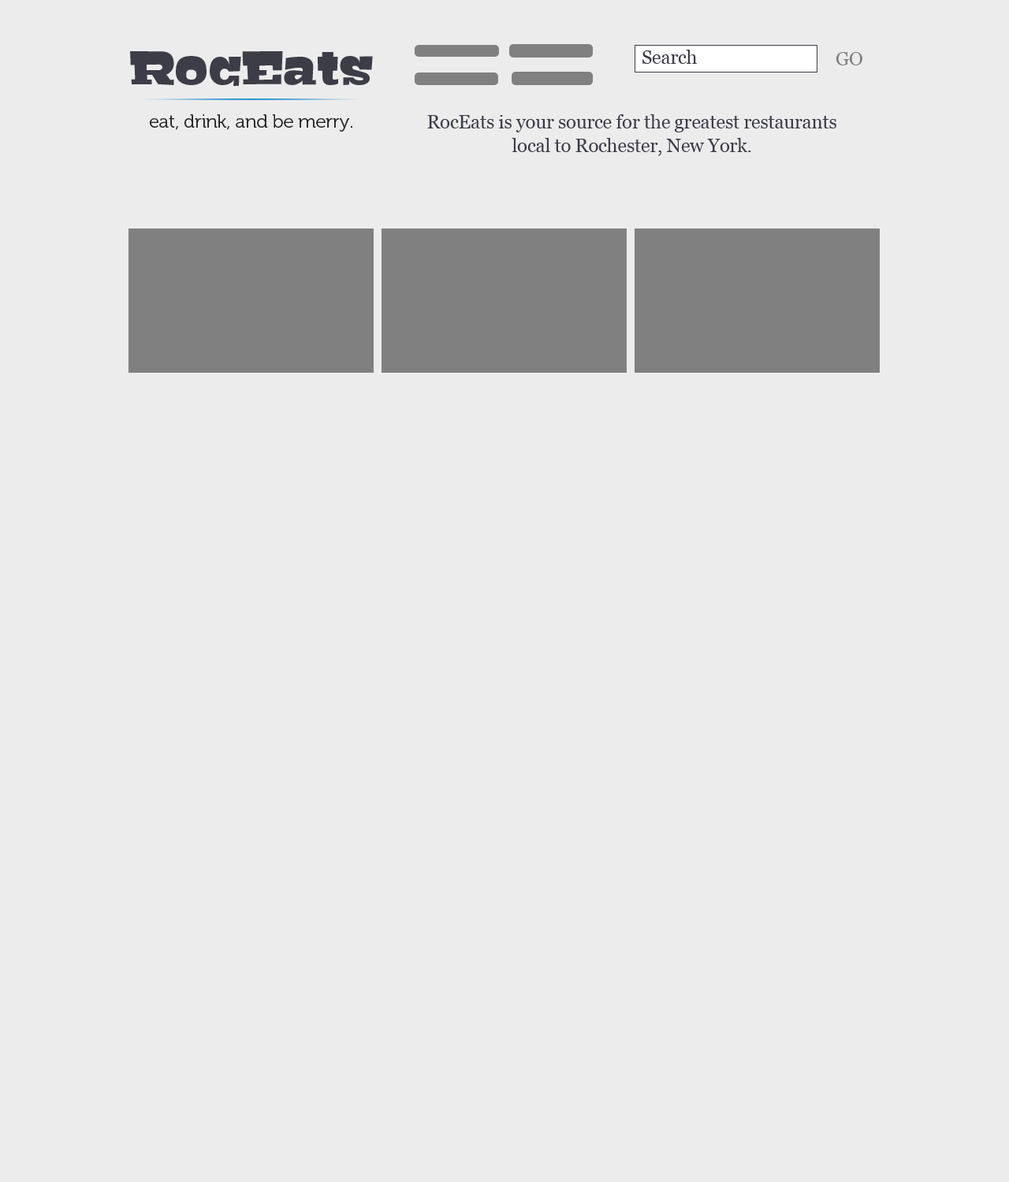
<style>
.page{position:relative;width:1009px;height:1182px;background:#ececec}
.page>*{position:absolute;margin:0}
.t1{font:51.2px "Bigfish-Black";letter-spacing:-0.01em;color:#3c3d47}
.t2{font:18.9px "Georgia";letter-spacing:-0.01em;color:#3c3d47}
.t3{font:18.9px "Georgia";letter-spacing:-0.01em;color:#808080}
.t4{font:18.9px "Museo-300";letter-spacing:-0.01em;color:#222222}
.t5{font:18.9px/23.6px "Georgia";letter-spacing:-0.01em;color:#3c3d47}
</style>
<div class="page">
<p class="t1" style="left:130px;top:51px;width:243px;height:35px">RocEats</p>
<p class="t2" style="left:642px;top:50px;width:55px;height:14px">Search</p>
<p class="t3" style="left:835px;top:52px;width:27px;height:13px">GO</p>
<p class="t4" style="left:150px;top:114px;width:202px;height:18px">eat, drink, and be merry.</p>
<p class="t5" style="left:427px;top:114px;width:409px;height:42px;text-align:center">RocEats is your source for the greatest restaurants local to Rochester, New York.</p>
</div>
